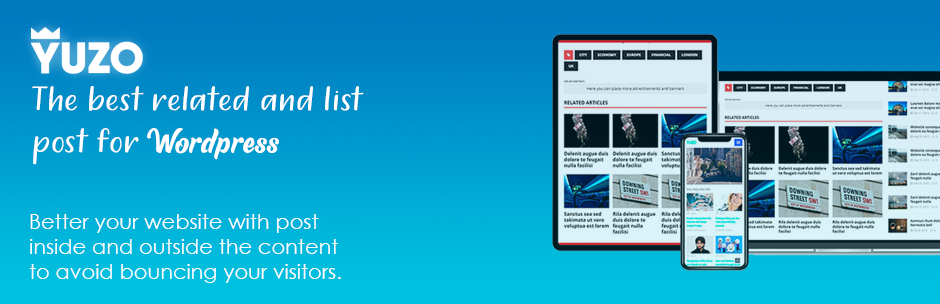
<style>
.page{position:relative;width:940px;height:304px}
.page>*{position:absolute;margin:0}
.t1{font:34.7px "212DreamerySansDemo";color:#ffffff}
.t2{font:34.7px "Lauthan";color:#ffffff}
.t3{font:20.9px "CenturyGothic";color:#ffffff}
</style>
<div class="page">
<p class="t1" style="left:32px;top:86px;width:332px;height:79px">The best related and list <br>post for</p>
<p class="t2" style="left:147px;top:128px;width:132px;height:32px">Wordpress</p>
<p class="t3" style="left:29px;top:214px;width:312px;height:69px">Better your website with post <br>inside and outside the content <br>to avoid bouncing your visitors.</p>
</div>
